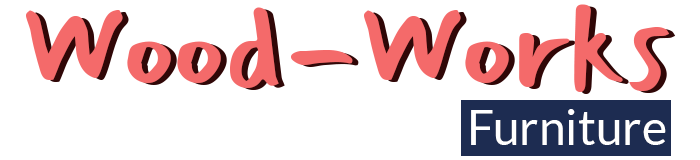
<style>
.page{position:relative;width:700px;height:160px;background:#ffffff}
.page>*{position:absolute;margin:0}
.t1{font:120px "Mansalva-Regular";color:#f46a6a}
.t2{font:120px "Mansalva-Regular"}
.t3{font:48px "Lato-Regular";color:#ffffff}
</style>
<div class="page">
<p class="t1" style="left:26px;top:4px;width:644px;height:88px">Wood-Works</p>
<p class="t2" style="left:32px;top:6px;width:644px;height:88px">Wood-Works</p>
<p class="t3" style="left:471px;top:109px;width:195px;height:36px">Furniture</p>
</div>
